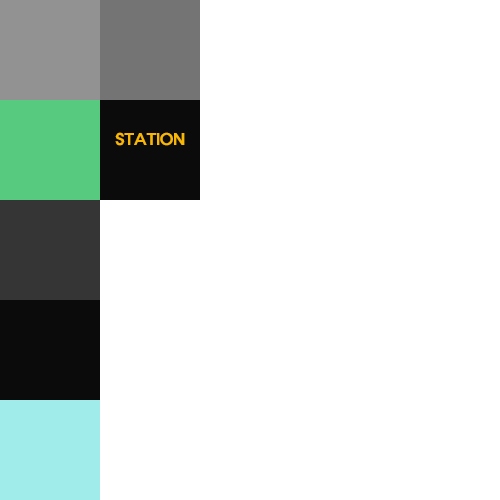
<style>
.page{position:relative;width:500px;height:500px;background:#ffffff}
.page>*{position:absolute;margin:0}
.t1{font:15px "ExpoM-HM";color:#f8b606}
</style>
<div class="page">
<p class="t1" style="left:115px;top:132px;width:70px;height:14px">STATION</p>
</div>
